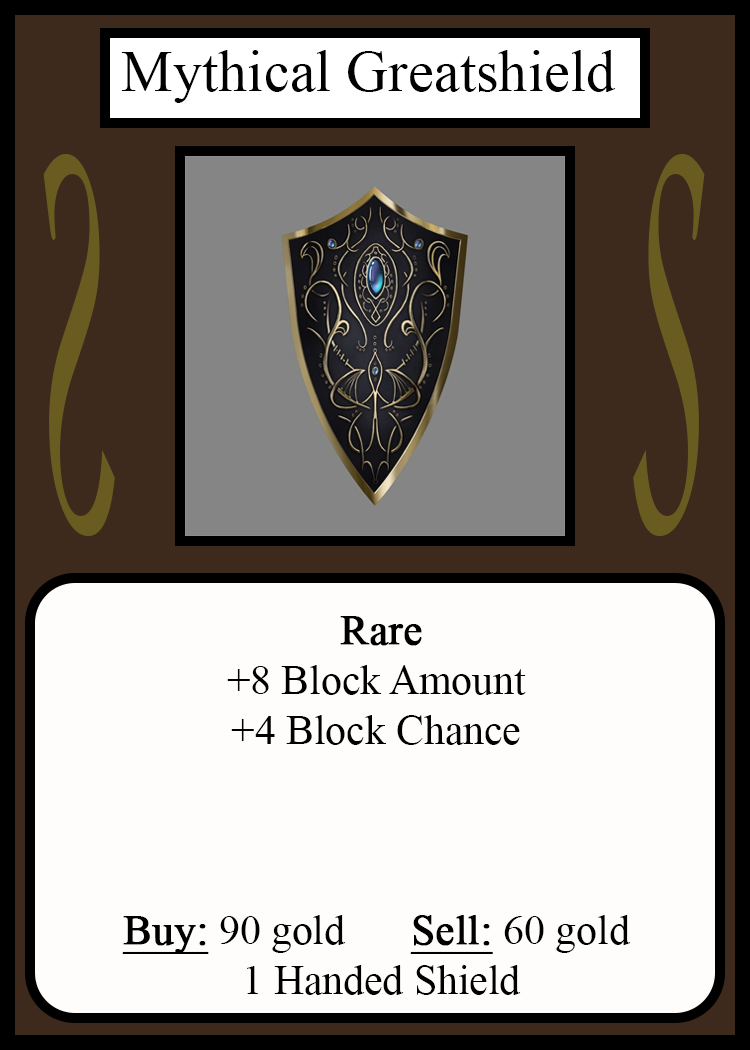
<style>
.page{position:relative;width:750px;height:1050px;background:#fffcfc}
.page>*{position:absolute;margin:0}
.t1{font:58.3px "TimesNewRomanPSMT";color:#010101}
.t2{font:548.5px "Apple-Chancery";color:#6a5c21;scale:0.27 1}
.t3{font:548.2px "Apple-Chancery";color:#6a5c21;scale:0.27 1}
.t4{font:41.7px "TimesNewRomanPSMT";color:#000000}
.t5{font:41.7px "TimesNewRomanPSMT";color:#000000;font-weight:bold}
.t6{font:41.7px "TimesNewRomanPSMT";color:#000000;font-weight:bold;text-decoration:underline}
</style>
<div class="page">
<p class="t1" style="left:121px;top:50px;width:495px;height:53px">Mythical Greatshield</p>
<p class="t2" style="left:43px;top:154px;width:72px;height:382px;rotate:180deg">S</p>
<p class="t3" style="left:633px;top:154px;width:72px;height:382px">S</p>
<p class="t4" style="left:122px;top:616px;width:509px;height:379px;text-align:center"><span class="t5">Rare</span><br>+8 Block Amount<br>+4 Block Chance<br><br><br><br><span class="t6">Buy:</span> 90 gold   <span class="t6">Sell:</span> 60 gold<br> 1 Handed Shield</p>
</div>
